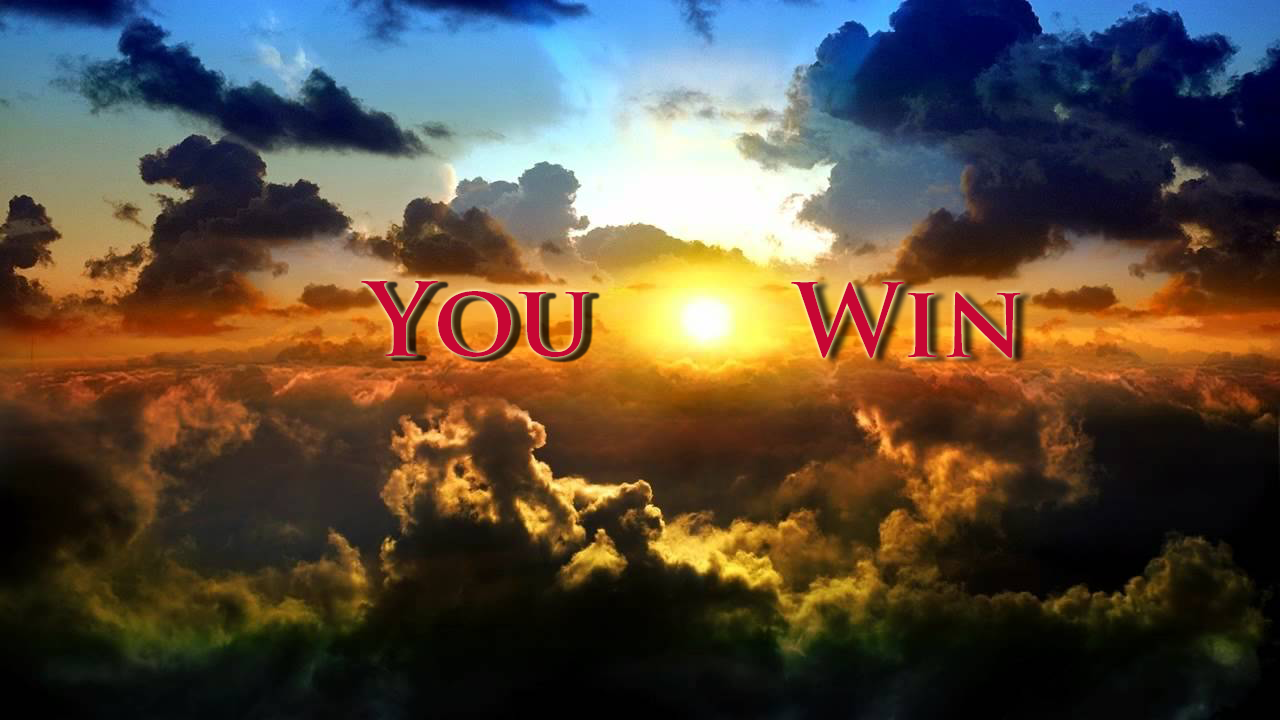
<style>
.page{position:relative;width:1280px;height:720px}
.page>*{position:absolute;margin:0}
.t1{font:100px "TrajanPro-Bold";color:#c70634}
</style>
<div class="page">
<p class="t1" style="left:361px;top:281px;width:229px;height:76px">You</p>
<p class="t1" style="left:791px;top:282px;width:230px;height:76px">Win</p>
</div>
